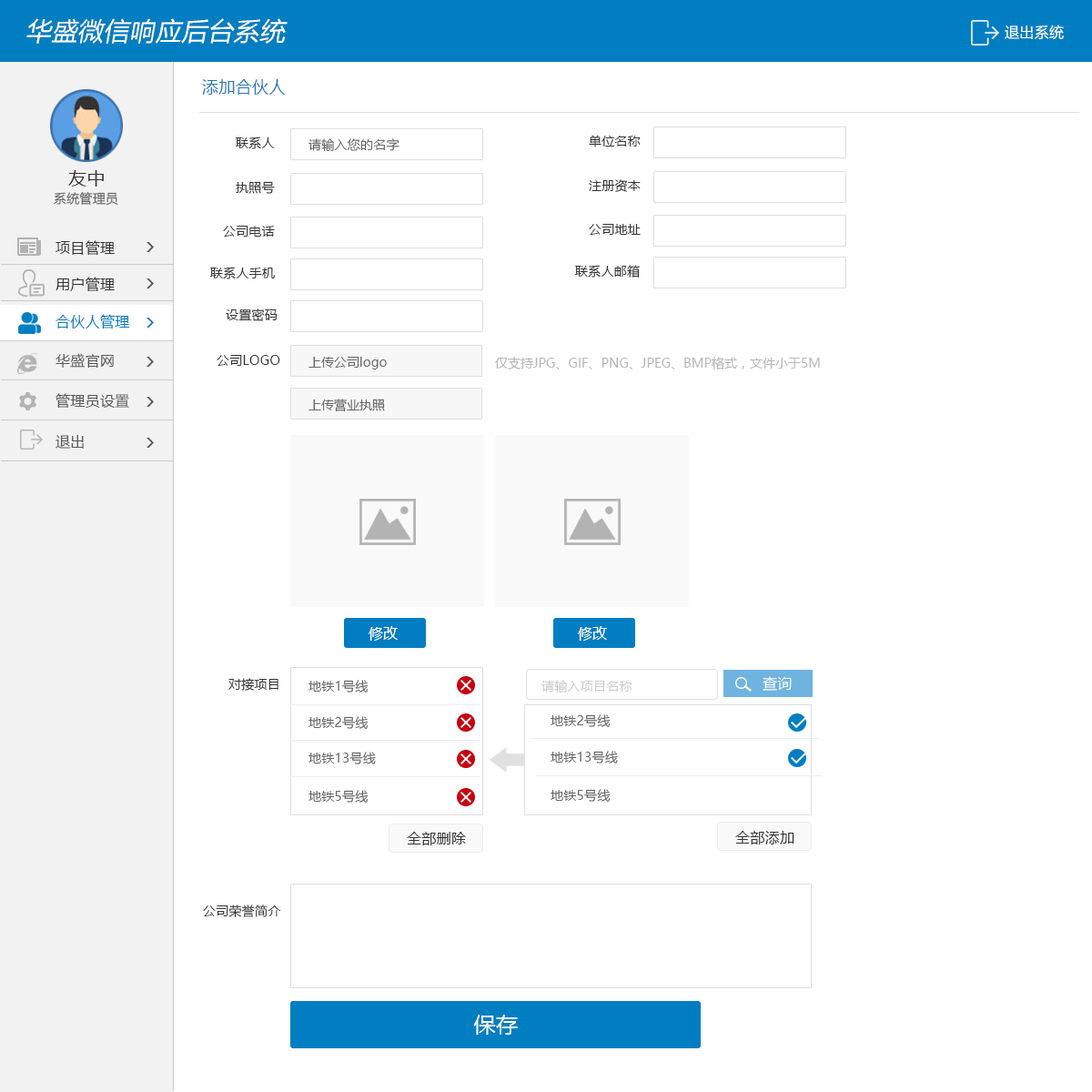
<style>
.page{position:relative;width:1092px;height:1092px;background:#ffffff}
.page>*{position:absolute;margin:0}
.t1{font:25.5px "MicrosoftYaHei";letter-spacing:0.02em;color:#ffffff;font-style:italic}
.t2{font:14.6px "MicrosoftYaHei";letter-spacing:0.02em;color:#ffffff}
.t3{font:16.4px "MicrosoftYaHei";letter-spacing:0.02em;color:#2977b3}
.t4{font:12.7px "MicrosoftYaHei";letter-spacing:0.02em;color:#333333}
.t5{font:12.7px "MicrosoftYaHei";letter-spacing:0.02em;color:#666666}
.t6{font:18.2px "MicrosoftYaHei";letter-spacing:0.02em;color:#333333}
.t7{font:14.6px "MicrosoftYaHei";letter-spacing:0.02em;color:#333333}
.t8{font:14.6px "MicrosoftYaHei";letter-spacing:0.02em;color:#017ec1}
.t9{font:14.6px "MicrosoftYaHei";letter-spacing:0.02em;color:#585858}
.t10{font:12.7px "MicrosoftYaHei";color:#666666}
.t11{font:12.7px "MicrosoftYaHei";color:#b7b7b7}
.t12{font:14.6px "MicrosoftYaHei";color:#ffffff}
.t13{font:14.6px "MicrosoftYaHei";letter-spacing:0.02em;color:#f9f9f9}
.t14{font:12.7px "MicrosoftYaHei";letter-spacing:0.02em;color:#cccccc}
.t15{font:21.8px "MicrosoftYaHei";letter-spacing:0.02em;color:#ffffff}
</style>
<div class="page">
<p class="t1" style="left:26px;top:18px;width:262px;height:26px">华盛微信响应后台系统</p>
<p class="t2" style="left:1005px;top:25px;width:59px;height:15px">退出系统</p>
<p class="t3" style="left:202px;top:79px;width:84px;height:16px">添加合伙人</p>
<p class="t4" style="left:236px;top:136px;width:39px;height:13px">联系人</p>
<p class="t4" style="left:589px;top:135px;width:52px;height:12px">单位名称</p>
<p class="t5" style="left:308px;top:138px;width:91px;height:14px">请输入您的名字</p>
<p class="t6" style="left:68px;top:170px;width:36px;height:17px">友中</p>
<p class="t4" style="left:236px;top:181px;width:39px;height:13px">执照号</p>
<p class="t4" style="left:589px;top:179px;width:52px;height:13px">注册资本</p>
<p class="t5" style="left:54px;top:192px;width:64px;height:14px">系统管理员</p>
<p class="t4" style="left:223px;top:226px;width:52px;height:11px">公司电话</p>
<p class="t4" style="left:589px;top:224px;width:52px;height:11px">公司地址</p>
<p class="t7" style="left:56px;top:240px;width:59px;height:15px">项目管理</p>
<p class="t4" style="left:210px;top:267px;width:65px;height:12px">联系人手机</p>
<p class="t4" style="left:575px;top:265px;width:65px;height:13px">联系人邮箱</p>
<p class="t7" style="left:56px;top:277px;width:59px;height:14px">用户管理</p>
<p class="t8" style="left:56px;top:314px;width:74px;height:15px">合伙人管理</p>
<p class="t4" style="left:226px;top:308px;width:52px;height:13px">设置密码</p>
<p class="t9" style="left:56px;top:353px;width:58px;height:15px">华盛官网</p>
<p class="t4" style="left:217px;top:355px;width:63px;height:11px">公司LOGO</p>
<p class="t10" style="left:308px;top:357px;width:79px;height:12px">上传公司logo</p>
<p class="t11" style="left:495px;top:357px;width:325px;height:13px">仅支持JPG、GIF、PNG、JPEG、BMP格式，文件小于5M</p>
<p class="t9" style="left:56px;top:393px;width:73px;height:16px">管理员设置</p>
<p class="t10" style="left:308px;top:399px;width:77px;height:13px">上传营业执照</p>
<p class="t9" style="left:56px;top:435px;width:28px;height:14px">退出</p>
<p class="t12" style="left:369px;top:626px;width:29px;height:15px">修改</p>
<p class="t12" style="left:578px;top:626px;width:29px;height:15px">修改</p>
<p class="t4" style="left:228px;top:678px;width:50px;height:13px">对接项目</p>
<p class="t13" style="left:763px;top:676px;width:29px;height:15px">查询</p>
<p class="t5" style="left:308px;top:680px;width:61px;height:13px">地铁1号线</p>
<p class="t14" style="left:541px;top:680px;width:91px;height:13px">请输入项目名称</p>
<p class="t5" style="left:308px;top:716px;width:61px;height:13px">地铁2号线</p>
<p class="t5" style="left:551px;top:714px;width:60px;height:13px">地铁2号线</p>
<p class="t5" style="left:308px;top:752px;width:68px;height:12px">地铁13号线</p>
<p class="t5" style="left:551px;top:751px;width:67px;height:12px">地铁13号线</p>
<p class="t5" style="left:308px;top:790px;width:61px;height:13px">地铁5号线</p>
<p class="t5" style="left:551px;top:789px;width:60px;height:13px">地铁5号线</p>
<p class="t7" style="left:407px;top:832px;width:59px;height:13px">全部删除</p>
<p class="t7" style="left:735px;top:831px;width:59px;height:13px">全部添加</p>
<p class="t4" style="left:203px;top:905px;width:78px;height:12px">公司荣誉简介</p>
<p class="t15" style="left:473px;top:1015px;width:45px;height:20px">保存</p>
</div>
